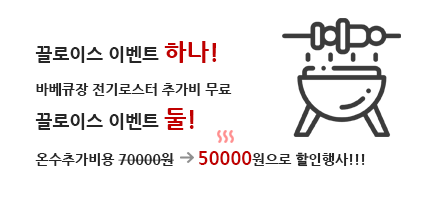
<style>
.page{position:relative;width:438px;height:200px;background:#ffffff}
.page>*{position:absolute;margin:0}
.t1{font:14px "NanumGothicExtraBold";color:#262626}
.t2{font:18px "NanumGothicExtraBold";color:#262626}
.t3{font:24px "NanumGothicExtraBold";color:#c00000}
.t4{font:18px "NanumGothicExtraBold";color:#c00000}
</style>
<div class="page">
<p class="t1" style="left:35px;top:41px;width:330px;height:126px"><span class="t2">끌로이스 이벤트 </span><span class="t3">하나!<br></span>바베큐장 전기로스터 추가비 무료<br><span class="t2">끌로이스 이벤트 </span><span class="t3">둘!<br></span>온수추가비용 70000원      <span class="t4">50000</span>원으로 할인행사!!!</p>
</div>
